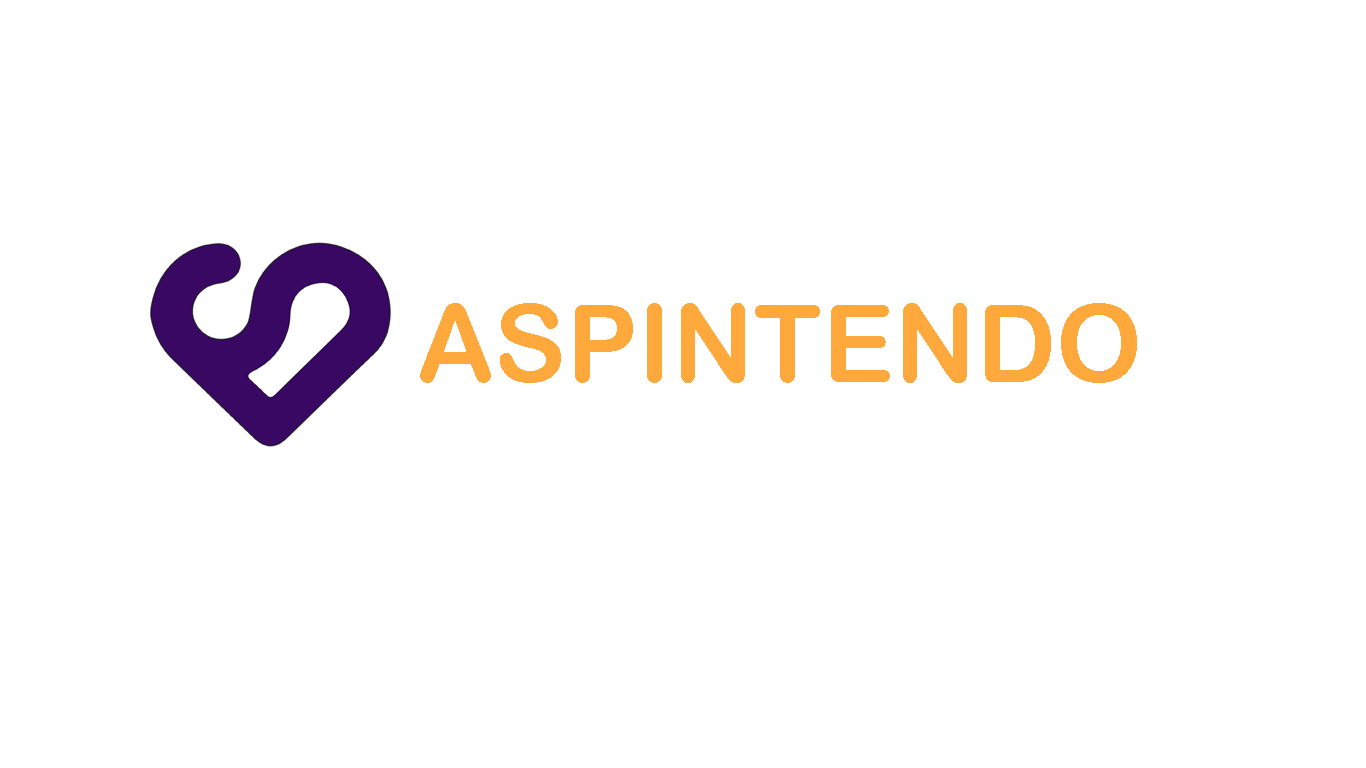
<style>
.page{position:relative;width:1366px;height:768px;background:#ffffff}
.page>*{position:absolute;margin:0}
.t1{font:108px "ArialRoundedMTBold";color:#ffa83b}
</style>
<div class="page">
<p class="t1" style="left:420px;top:303px;width:717px;height:80px">ASPINTENDO</p>
</div>
